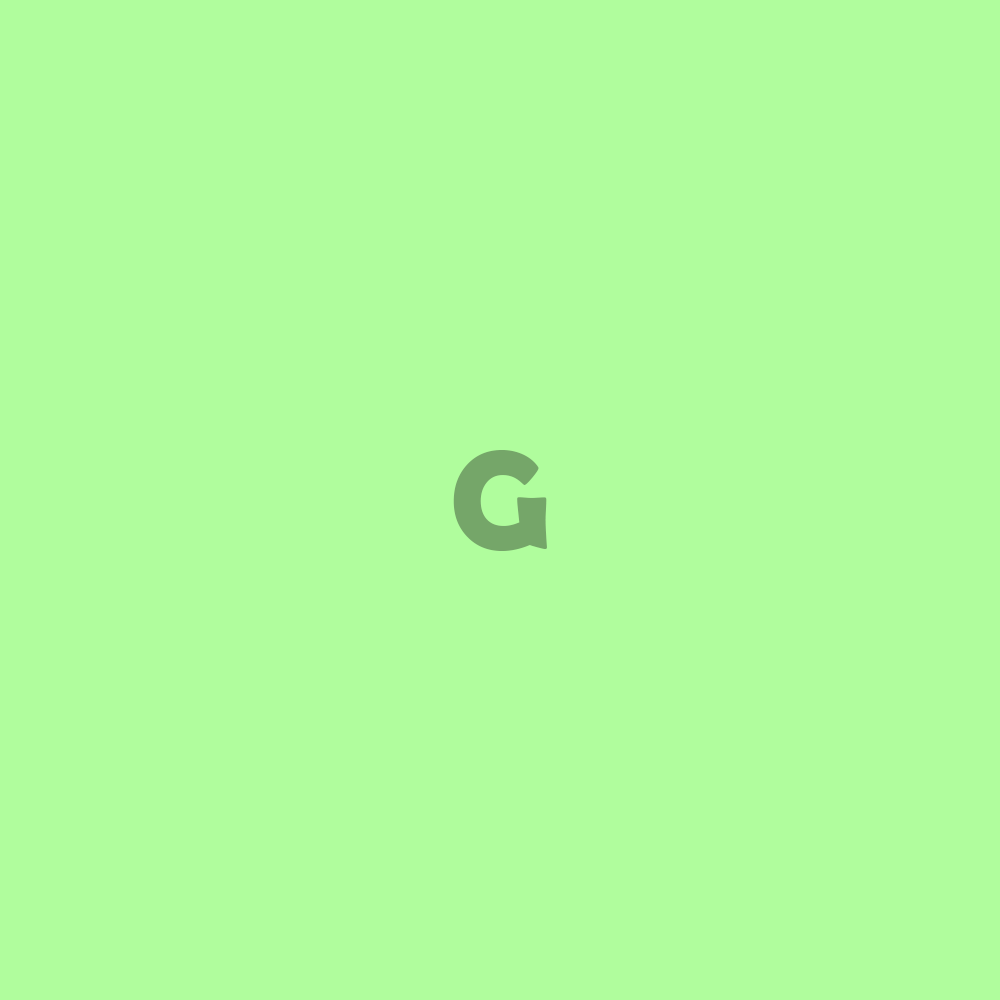
<style>
.page{position:relative;width:1000px;height:1000px;background:#b0fd9d}
.page>*{position:absolute;margin:0}
.t1{font:141.1px "BerlinSansFBDemi-Bold";color:#75a669}
</style>
<div class="page">
<p class="t1" style="left:453px;top:450px;width:94px;height:101px">G</p>
</div>
